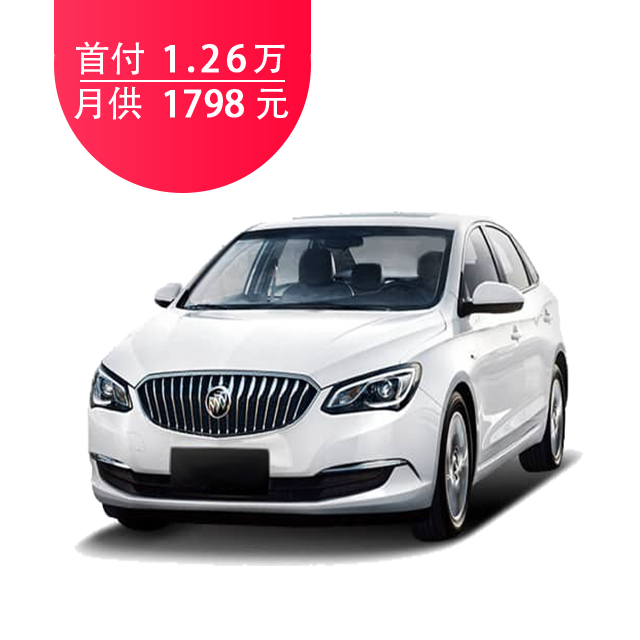
<style>
.page{position:relative;width:640px;height:640px;background:#ffffff}
.page>*{position:absolute;margin:0}
.t1{font:36.3px "AdobeHeitiStd-Regular";letter-spacing:0.125em;color:#ffffff;font-weight:bold}
.t2{font:36.3px "AdobeHeitiStd-Regular";letter-spacing:0.005em;color:#ffffff}
.t3{font:36.3px "AdobeHeitiStd-Regular";letter-spacing:0.105em;color:#ffffff}
.t4{font:36.3px "AdobeHeitiStd-Regular";letter-spacing:0.045em;color:#ffffff}
.t5{font:36.3px "AdobeHeitiStd-Regular";letter-spacing:0.005em;color:#ffffff;font-weight:bold}
</style>
<div class="page">
<p class="t1" style="left:76px;top:41px;width:209px;height:34px"><span class="t2">首</span><span class="t3">付 </span>1.26<span class="t4">万</span></p>
<p class="t5" style="left:74px;top:86px;width:215px;height:34px"><span class="t2">月供</span>  1798 <span class="t2">元</span></p>
</div>
